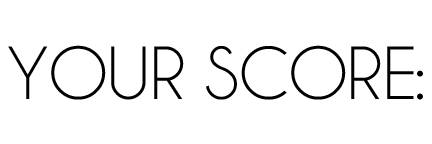
<style>
.page{position:relative;width:432px;height:144px;background:#ffffff}
.page>*{position:absolute;margin:0}
.t1{font:76px "Champagne&Limousines";color:#000000}
</style>
<div class="page">
<p class="t1" style="left:8px;top:45px;width:415px;height:55px">YOUR SCORE:</p>
</div>
